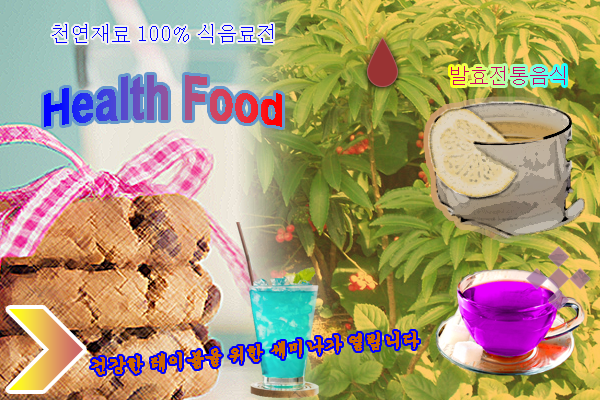
<style>
.page{position:relative;width:600px;height:400px}
.page>*{position:absolute;margin:0}
.t1{font:20px "Batang";color:#0000ff}
.t2{font:42px "Arial-BoldMT"}
.t3{font:20px "Dotum";color:#cc0066}
.t4{font:18px "Gungsuh";color:#cc6600}
</style>
<div class="page">
<p class="t1" style="left:52px;top:24px;width:221px;height:19px">천연재료 100% 식음료전</p>
<p class="t2" style="left:44px;top:75px;width:238px;height:52px">Health Food</p>
<p class="t3" style="left:451px;top:66px;width:114px;height:19px">발효전통음식</p>
<p class="t4" style="left:91px;top:331px;width:328px;height:44px">건강한 테이블을 위한 세미나가 열립니다</p>
</div>
